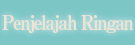
<style>
.page{position:relative;width:135px;height:45px;background:#7dc6c6}
.page>*{position:absolute;margin:0}
.t1{font:20px "RyuminPro-ExBold";letter-spacing:-0.08em;color:#f1e6d8;scale:0.9 1}
</style>
<div class="page">
<p class="t1" style="left:2px;top:15px;width:132px;height:18px">Penjelajah Ringan</p>
</div>
